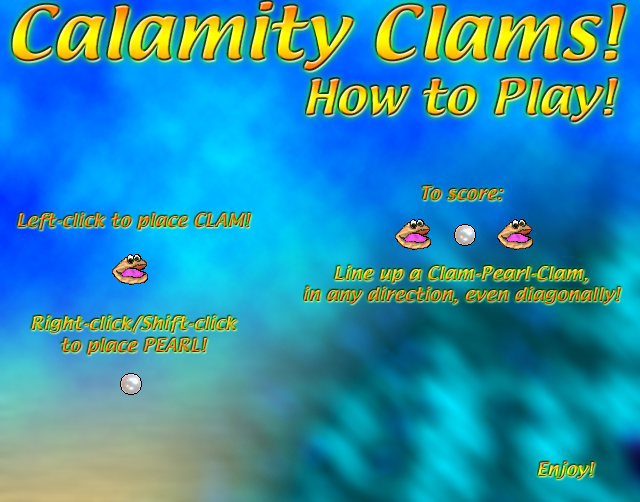
<style>
.page{position:relative;width:640px;height:502px}
.page>*{position:absolute;margin:0}
.t1{font:64.8px "TextileRegular";scale:1.11 1}
.t2{font:43.2px "TextileRegular";scale:1.11 1}
.t3{font:16.2px/21px "TextileRegular";scale:1.11 1}
.t4{font:16.2px/59px "TextileRegular";scale:1.11 1}
.t5{font:16.2px/22px "TextileRegular";scale:1.11 1}
.t6{font:16.2px "TextileRegular";scale:1.11 1}
</style>
<div class="page">
<p class="t1" style="left:12px;top:1px;width:614px;height:70px">Calamity Clams!</p>
<p class="t2" style="left:306px;top:78px;width:312px;height:45px">How to Play!</p>
<p class="t3" style="left:304px;top:185px;width:317px;height:119px;text-align:center"><span class="t4">To score:<br><br></span>Line up a Clam-Pearl-Clam,<br>in any direction, even diagonally!</p>
<p class="t5" style="left:17px;top:212px;width:234px;height:143px;text-align:center"><span class="t4">Left-click to place CLAM!<br><br></span><br>Right-click/Shift-click<br>to place PEARL!</p>
<p class="t6" style="left:538px;top:461px;width:57px;height:18px">Enjoy!</p>
</div>
